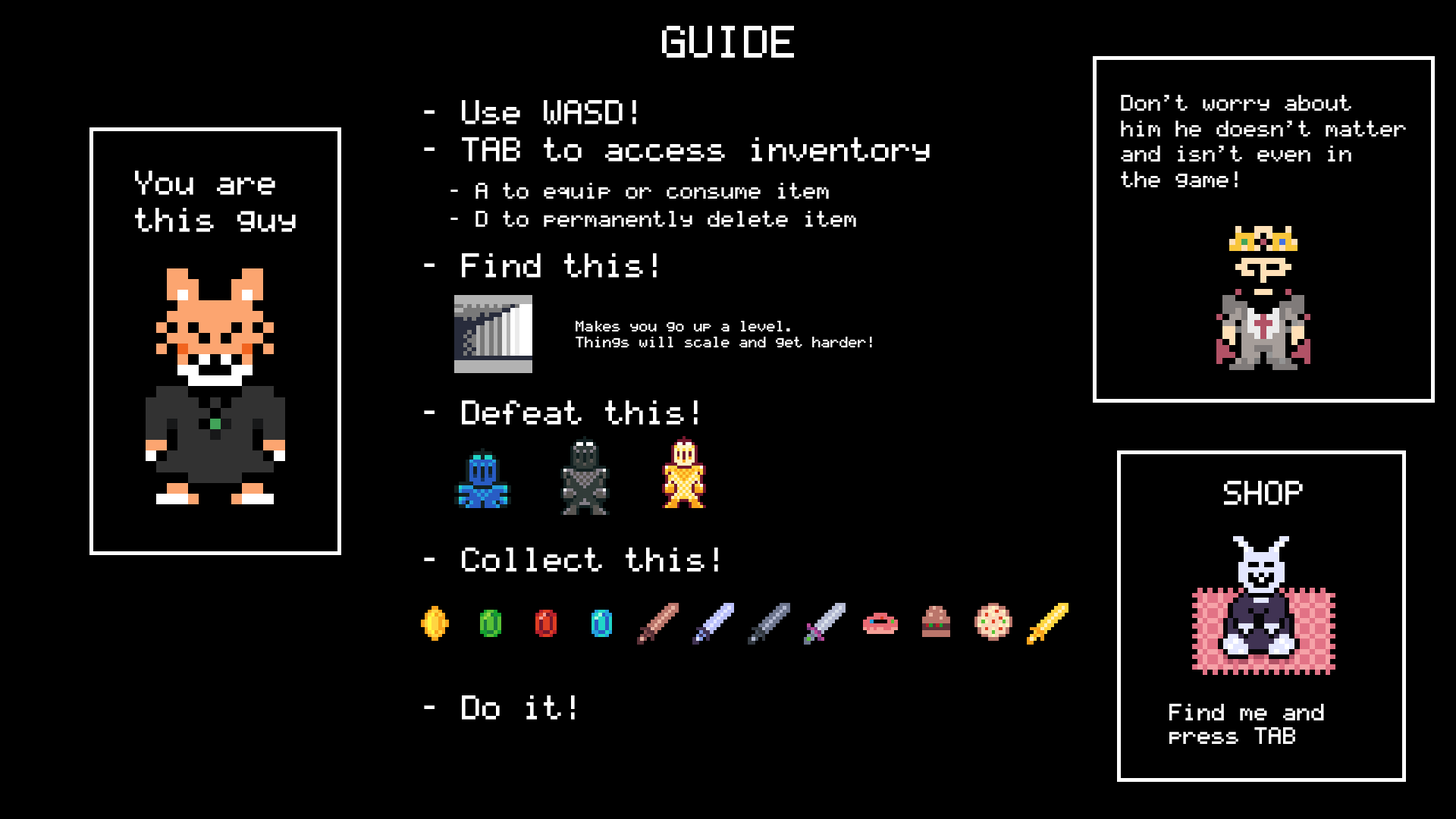
<style>
.page{position:relative;width:1456px;height:819px;background:#000000}
.page>*{position:absolute;margin:0}
.t1{font:36.4px "TI-83-Plus-Large";color:#ffffff}
.t2{font:18.2px/27.8px "TI-83-Plus-Large";color:#ffffff}
.t3{font:27.3px/36.9px "TI-83-Plus-Large";color:#ffffff}
.t4{font:27.3px/51.3px "TI-83-Plus-Large";color:#ffffff}
.t5{font:18.2px/25.5px "TI-83-Plus-Large";color:#ffffff}
.t6{font:12.1px/15.9px "TI-83-Plus-Large";color:#ffffff}
.t7{font:27.3px "TI-83-Plus-Large";color:#ffffff}
.t8{font:19px/24px "TI-83-Plus-Large";color:#ffffff}
</style>
<div class="page">
<p class="t1" style="left:662px;top:26px;width:132px;height:32px">GUIDE</p>
<p class="t2" style="left:424px;top:100px;width:506px;height:620px"><span class="t3">- Use WASD!<br>- TAB to access inventory<br> </span>- A to equip or consume item<br> - D to permanently delete item<br><span class="t4">- Find this!<br></span><span class="t3"><br><br><br>- Defeat this!<br><br><br><br>- Collect this!<br><br><br><br>- Do it!</span></p>
<p class="t5" style="left:1121px;top:95px;width:285px;height:92px">Don’t worry about<br>him he doesn’t matter<br>and isn’t even in<br>the game!</p>
<p class="t3" style="left:135px;top:171px;width:161px;height:61px">You are <br>this guy</p>
<p class="t6" style="left:576px;top:321px;width:296px;height:27px">Makes you go up a level. <br>Things will scale and get harder!</p>
<p class="t7" style="left:1224px;top:481px;width:79px;height:24px">SHOP</p>
<p class="t8" style="left:1169px;top:704px;width:155px;height:40px">Find me and<br>press TAB</p>
</div>
